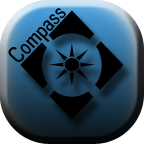
<style>
.page{position:relative;width:144px;height:144px}
.page>*{position:absolute;margin:0}
.t1{font:23.5px "AkazanRg";color:#000000}
</style>
<div class="page">
<p class="t1" style="left:8px;top:8px;width:58px;height:54px;rotate:-46deg">Compass</p>
</div>
